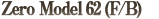
<style>
.page{position:relative;width:159px;height:19px;background:#ffffff}
.page>*{position:absolute;margin:0}
.t1{font:18px "RyuminPro-ExBold";letter-spacing:-0.08em;color:#4a3f32;font-weight:bold;scale:0.9 1}
</style>
<div class="page">
<p class="t1" style="left:1px;top:1px;width:141px;height:18px">Zero Model 62 (F/B)</p>
</div>
